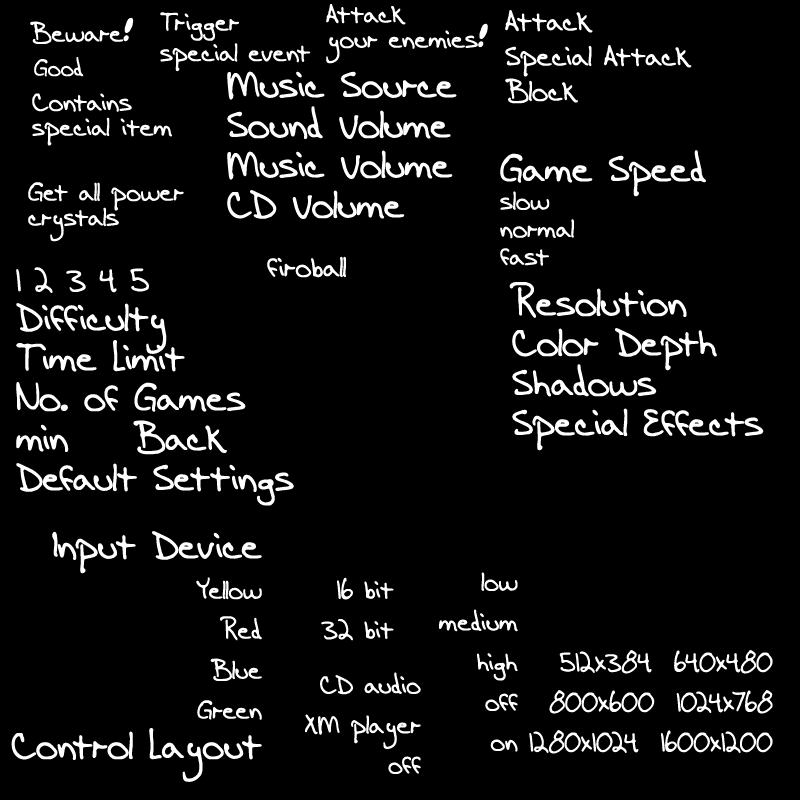
<style>
.page{position:relative;width:800px;height:800px;background:#000000}
.page>*{position:absolute;margin:0}
.t1{font:27.8px/25px "AEnigmaScrawl4BRK";color:#ffffff}
.t2{font:27.8px "AEnigmaScrawl4BRK";color:#ffffff}
.t3{font:30.6px/35px "AEnigmaScrawl4BRK";color:#ffffff}
.t4{font:25px "AEnigmaScrawl4BRK";color:#ffffff}
.t5{font:41.7px/40px "AEnigmaScrawl4BRK";letter-spacing:-0.01em;color:#ffffff}
.t6{font:27.8px/27.8px "AEnigmaScrawl4BRK";color:#ffffff}
.t7{font:41.7px/27.8px "AEnigmaScrawl4BRK";letter-spacing:-0.01em;color:#ffffff}
.t8{font:30.6px "AEnigmaScrawl4BRK";color:#ffffff}
.t9{font:33.3px/40px "AEnigmaScrawl4BRK";color:#ffffff}
.t10{font:27.8px/40px "AEnigmaScrawl4BRK";color:#ffffff}
</style>
<div class="page">
<p class="t1" style="left:326px;top:4px;width:162px;height:60px">Attack <br>your enemies!</p>
<p class="t2" style="left:30px;top:17px;width:104px;height:27px">Beware!</p>
<p class="t1" style="left:160px;top:12px;width:151px;height:60px">Trigger<br>special event</p>
<p class="t3" style="left:505px;top:10px;width:187px;height:94px">Attack <br>Special Attack <br>Block</p>
<p class="t4" style="left:34px;top:57px;width:50px;height:20px">Good</p>
<p class="t5" style="left:227px;top:71px;width:230px;height:148px">Music Source<br>Sound Volume<br>Music Volume<br>CD Volume</p>
<p class="t1" style="left:32px;top:93px;width:140px;height:53px">Contains<br>special item</p>
<p class="t6" style="left:500px;top:150px;width:206px;height:116px"><span class="t7">Game Speed<br></span>slow<br>normal<br>fast</p>
<p class="t1" style="left:28px;top:182px;width:156px;height:60px">Get all power<br>crystals</p>
<p class="t8" style="left:267px;top:256px;width:79px;height:22px">firoball</p>
<p class="t5" style="left:16px;top:267px;width:278px;height:239px"><span class="t9">1 2 3 4 5<br></span>Difficulty<br>Time Limit<br>No. of Games<br>min    Back<br>Default Settings</p>
<p class="t5" style="left:509px;top:282px;width:255px;height:169px">Resolution<br>Color Depth<br>Shadows<br>Special Effects</p>
<p class="t10" style="left:11px;top:531px;width:251px;height:251px;text-align:right"><span class="t5">Input Device<br></span>Yellow<br>Red<br>Blue<br>Green<br><span class="t5">Control Layout</span></p>
<p class="t10" style="left:321px;top:577px;width:73px;height:64px;text-align:right">16 bit<br>32 bit</p>
<p class="t10" style="left:439px;top:572px;width:79px;height:180px;text-align:right">low<br>medium<br>high<br>off<br>on</p>
<p class="t10" style="left:529px;top:650px;width:244px;height:104px;text-align:right">512x384  640x480<br>800x600  1024x768<br>1280x1024  1600x1200</p>
<p class="t10" style="left:305px;top:672px;width:116px;height:102px;text-align:right">CD audio<br>XM player<br>off</p>
</div>
